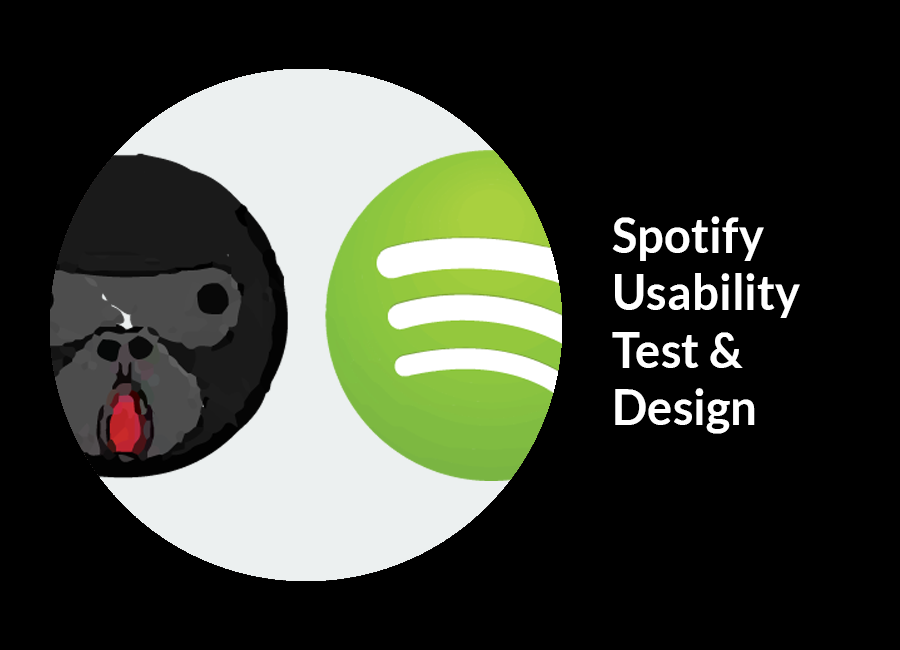
<style>
.page{position:relative;width:900px;height:650px;background:#000000}
.page>*{position:absolute;margin:0}
.t1{font:48px "Lato-Bold";color:#ffffff}
</style>
<div class="page">
<p class="t1" style="left:612px;top:216px;width:188px;height:218px">Spotify<br>Usability<br>Test &amp;<br>Design</p>
</div>
